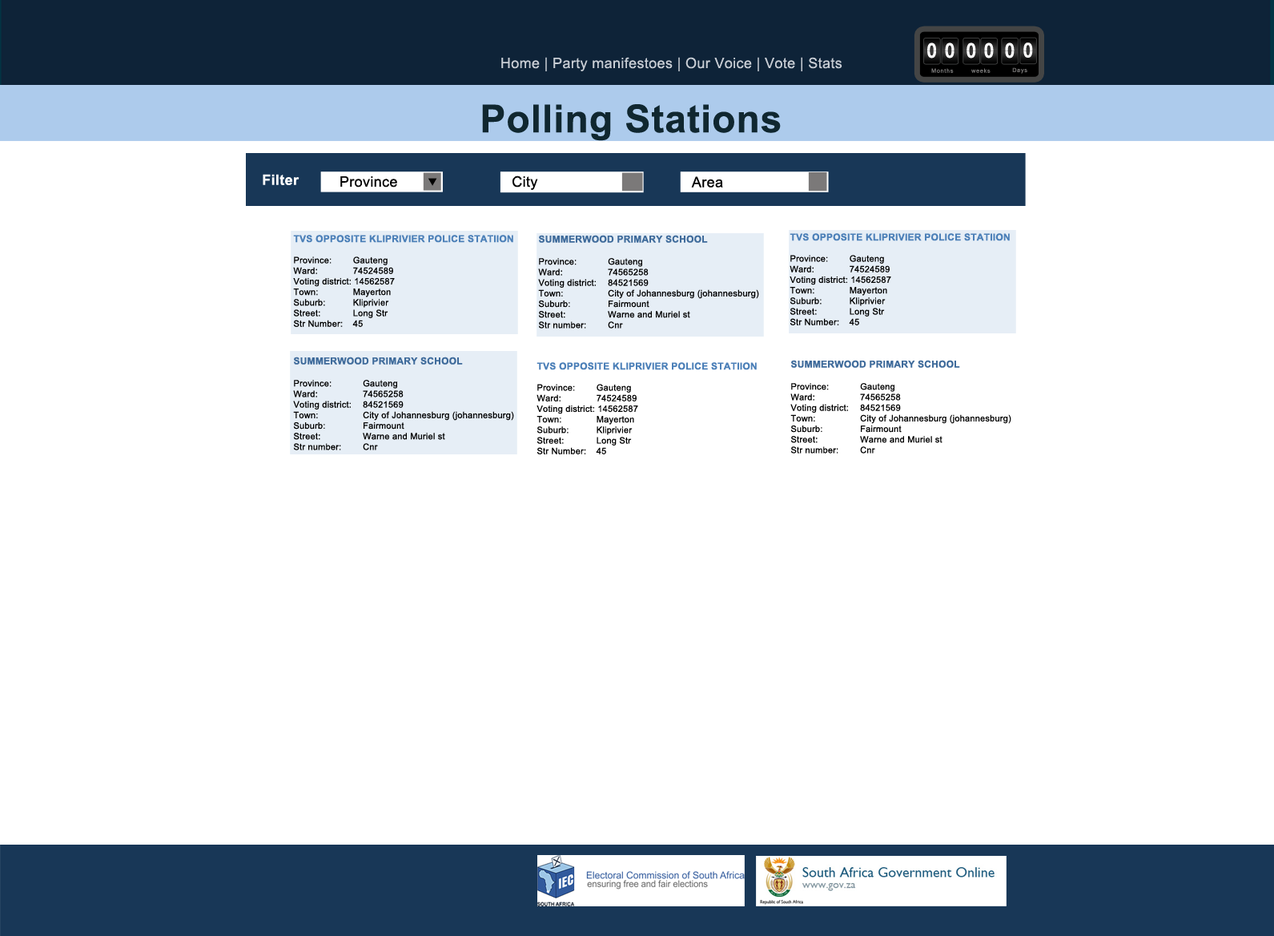
<style>
.page{position:relative;width:1274px;height:936px;background:#ffffff}
.page>*{position:absolute;margin:0}
.t1{font:20px "Kartika-Bold";letter-spacing:0.105em;color:#ffffff;scale:0.88 1}
.t2{font:14.4px "ArialMT";letter-spacing:0.02em;color:#c9ced5}
.t3{font:5.6px "Kartika";letter-spacing:0.105em;color:#777676}
.t4{font:38.5px "Arial-BoldMT";letter-spacing:0.02em;color:#102730}
.t5{font:14.4px "Arial-BoldMT";letter-spacing:0.02em;color:#ffffff}
.t6{font:14.4px "ArialMT";letter-spacing:0.02em;color:#000000}
.t7{font:8.8px "ArialMT";letter-spacing:0.02em;color:#000000}
.t8{font:9.6px "Arial-BoldMT";letter-spacing:0.02em;color:#4c80b8}
.t9{font:9.6px "Arial-BoldMT";letter-spacing:0.02em;color:#3f6b9b}
</style>
<div class="page">
<p class="t1" style="left:928px;top:42px;width:8px;height:16px">0</p>
<p class="t1" style="left:945px;top:42px;width:10px;height:16px">0</p>
<p class="t1" style="left:967px;top:42px;width:9px;height:16px">0</p>
<p class="t1" style="left:984px;top:42px;width:10px;height:16px">0</p>
<p class="t1" style="left:1005px;top:42px;width:10px;height:16px">0</p>
<p class="t1" style="left:1024px;top:42px;width:9px;height:16px">0</p>
<p class="t2" style="left:501px;top:57px;width:342px;height:14px">Home | Party manifestoes | Our Voice | Vote | Stats</p>
<p class="t3" style="left:932px;top:68px;width:22px;height:5px">Months</p>
<p class="t3" style="left:972px;top:68px;width:19px;height:5px">weeks</p>
<p class="t3" style="left:1013px;top:67px;width:15px;height:7px">Days</p>
<p class="t4" style="left:482px;top:104px;width:299px;height:37px">Polling Stations</p>
<p class="t5" style="left:263px;top:174px;width:37px;height:11px">Filter</p>
<p class="t6" style="left:340px;top:176px;width:57px;height:11px">Province</p>
<p class="t6" style="left:513px;top:175px;width:25px;height:15px">City</p>
<p class="t6" style="left:691px;top:176px;width:32px;height:11px">Area</p>
<p class="t7" style="left:790px;top:233px;width:220px;height:92px"><span class="t8">TVS OPPOSITE KLIPRIVIER POLICE STATIION<br></span><br>Province:   Gauteng<br>Ward:    74524589<br>Voting district: 14562587<br>Town:    Mayerton<br>Suburb:   Kliprivier<br>Street:    Long Str<br>Str Number:  45</p>
<p class="t7" style="left:293px;top:235px;width:220px;height:92px"><span class="t8">TVS OPPOSITE KLIPRIVIER POLICE STATIION<br></span><br>Province:   Gauteng<br>Ward:    74524589<br>Voting district: 14562587<br>Town:    Mayerton<br>Suburb:   Kliprivier<br>Street:    Long Str<br>Str Number:  45</p>
<p class="t7" style="left:538px;top:235px;width:221px;height:93px"><span class="t9">SUMMERWOOD PRIMARY SCHOOL<br><br></span>Province:    Gauteng<br>Ward:     74565258<br>Voting district:  84521569<br>Town:     City of Johannesburg (johannesburg)<br>Suburb:    Fairmount<br>Street:     Warne and Muriel st<br>Str number:   Cnr</p>
<p class="t7" style="left:293px;top:356px;width:221px;height:94px"><span class="t9">SUMMERWOOD PRIMARY SCHOOL<br><br></span>Province:    Gauteng<br>Ward:     74565258<br>Voting district:  84521569<br>Town:     City of Johannesburg (johannesburg)<br>Suburb:    Fairmount<br>Street:     Warne and Muriel st<br>Str number:   Cnr</p>
<p class="t7" style="left:537px;top:362px;width:220px;height:92px"><span class="t8">TVS OPPOSITE KLIPRIVIER POLICE STATIION<br></span><br>Province:   Gauteng<br>Ward:    74524589<br>Voting district: 14562587<br>Town:    Mayerton<br>Suburb:   Kliprivier<br>Street:    Long Str<br>Str Number:  45</p>
<p class="t7" style="left:791px;top:360px;width:221px;height:93px"><span class="t9">SUMMERWOOD PRIMARY SCHOOL<br><br></span>Province:    Gauteng<br>Ward:     74565258<br>Voting district:  84521569<br>Town:     City of Johannesburg (johannesburg)<br>Suburb:    Fairmount<br>Street:     Warne and Muriel st<br>Str number:   Cnr</p>
</div>
